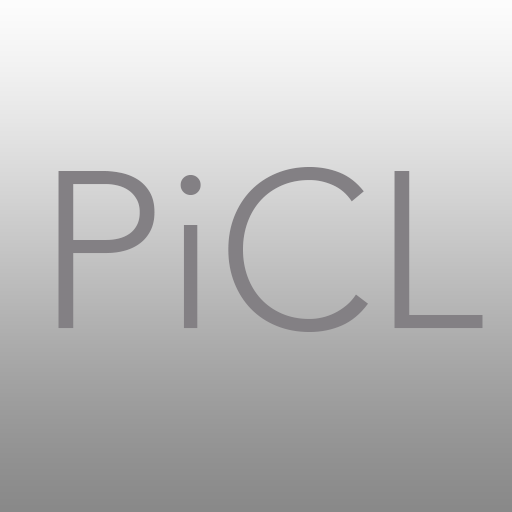
<style>
.page{position:relative;width:512px;height:512px}
.page>*{position:absolute;margin:0}
.t1{font:221.7px "Avenir-Light";color:#838084}
</style>
<div class="page">
<p class="t1" style="left:58px;top:167px;width:425px;height:165px">PiCL</p>
</div>
